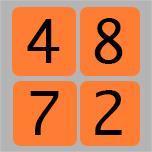
<style>
.page{position:relative;width:152px;height:152px;background:#ff7d32}
.page>*{position:absolute;margin:0}
.t1{font:57.9px "Ayuthaya";color:#000000}
</style>
<div class="page">
<p class="t1" style="left:27px;top:19px;width:33px;height:44px">4</p>
<p class="t1" style="left:94px;top:18px;width:29px;height:46px">8</p>
<p class="t1" style="left:30px;top:91px;width:29px;height:44px">7</p>
<p class="t1" style="left:95px;top:90px;width:27px;height:45px">2</p>
</div>
